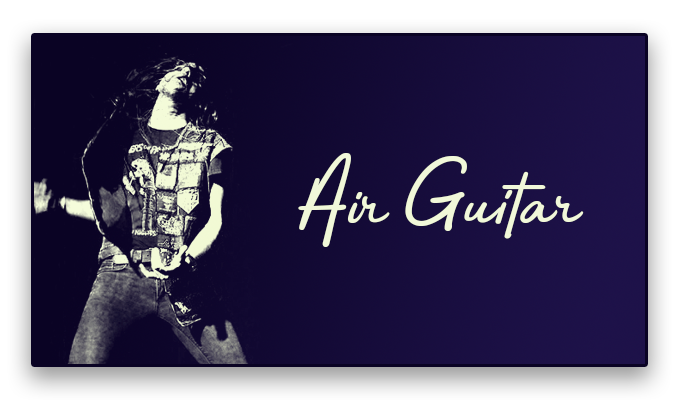
<style>
.page{position:relative;width:680px;height:400px}
.page>*{position:absolute;margin:0}
.t1{font:101.2px "Bahagia";color:#f1f8d9}
</style>
<div class="page">
<p class="t1" style="left:298px;top:153px;width:286px;height:94px">Air Guitar</p>
</div>
